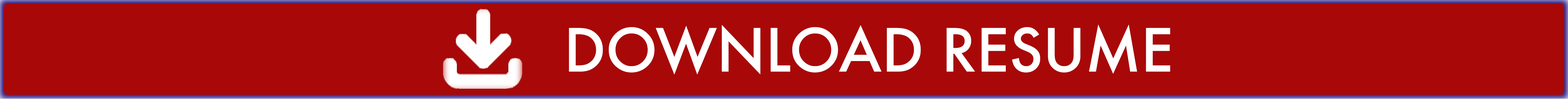
<style>
.page{position:relative;width:1568px;height:99px;background:#a80808}
.page>*{position:absolute;margin:0}
.t1{font:57.8px "Futura-Medium";color:#ffffff}
</style>
<div class="page">
<p class="t1" style="left:569px;top:24px;width:601px;height:51px">DOWNLOAD RESUME</p>
</div>
